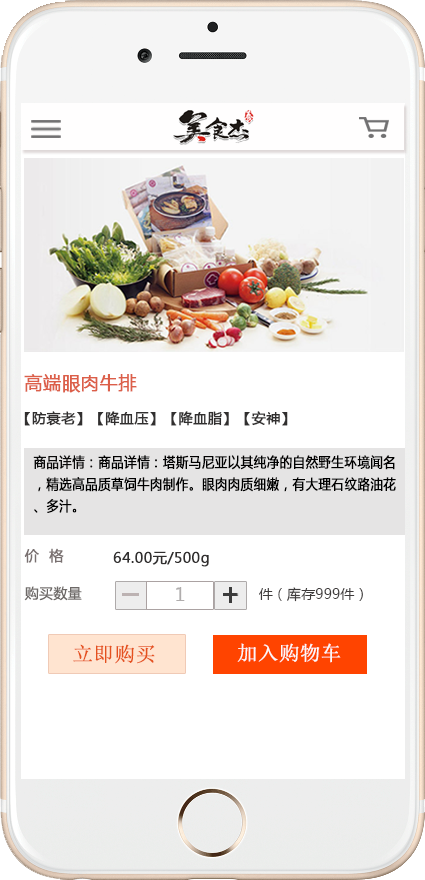
<style>
.page{position:relative;width:425px;height:880px;background:#ffffff}
.page>*{position:absolute;margin:0}
.t1{font:18px "MicrosoftYaHei";letter-spacing:0.02em;color:#dc5f49;font-weight:bold}
.t2{font:14px "MicrosoftYaHei";letter-spacing:0.02em;color:#312f2f;font-weight:bold}
.t3{font:14px/21.8px "MicrosoftYaHei";letter-spacing:0.02em;color:#000000;font-weight:bold;scale:0.88 1}
.t4{font:14px/21.8px "MicrosoftYaHei";letter-spacing:0.02em;color:#0b0b0b;font-weight:bold;scale:0.88 1}
.t5{font:14px "MicrosoftYaHei";letter-spacing:0.02em;color:#797070;font-weight:bold}
.t6{font:14px "MicrosoftYaHei";letter-spacing:0.02em;color:#6d6967}
.t7{font:18px "MicrosoftYaHei";letter-spacing:0.01em;color:#b0adad}
.t8{font:14px "MicrosoftYaHei";letter-spacing:0.01em;color:#3f3c3c}
.t9{font:20px "SimSun";letter-spacing:0.02em;color:#e5511d;font-weight:bold}
.t10{font:20px "SimSun";letter-spacing:0.02em;color:#fbf8f7;font-weight:bold}
</style>
<div class="page">
<p class="t1" style="left:24px;top:374px;width:113px;height:19px">高端眼肉牛排</p>
<p class="t2" style="left:24px;top:411px;width:264px;height:15px">【防衰老】【降血压】【降血脂】【安神】</p>
<p class="t3" style="left:33px;top:455px;width:363px;height:58px"><span class="t4">商品详情：</span>商品详情：塔斯马尼亚以其纯净的自然野生环境闻名，精选高品质草饲牛肉制作。眼肉肉质细嫩，有大理石纹路油花、多汁。</p>
<p class="t5" style="left:24px;top:548px;width:40px;height:15px">价  格</p>
<p class="t2" style="left:113px;top:551px;width:96px;height:16px">64.00元/500g</p>
<p class="t6" style="left:24px;top:586px;width:58px;height:15px">购买数量</p>
<p class="t7" style="left:176px;top:587px;width:9px;height:14px">1</p>
<p class="t8" style="left:259px;top:587px;width:104px;height:15px">件（库存999件）</p>
<p class="t9" style="left:73px;top:644px;width:82px;height:20px">立即购买</p>
<p class="t10" style="left:237px;top:643px;width:104px;height:20px">加入购物车</p>
</div>
